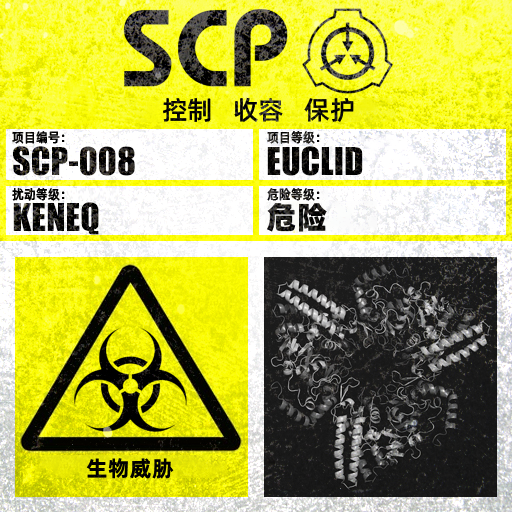
<style>
.page{position:relative;width:512px;height:512px}
.page>*{position:absolute;margin:0}
.t1{font:26px "AlibabaPuHuiTiM";color:#000000}
.t2{font:13.3px "AlibabaPuHuiTiM";letter-spacing:0.02em;color:#000000;scale:0.9 1}
.t3{font:13.3px "AlibabaPuHuiTiM";letter-spacing:0.02em;scale:0.9 1}
.t4{font:30.3px "AlibabaPuHuiTiH";letter-spacing:0.02em}
.t5{font:22px "AlibabaPuHuiTiB";letter-spacing:0.02em;color:#000000}
</style>
<div class="page">
<p class="t1" style="left:163px;top:97px;width:191px;height:26px">控制   收容   保护</p>
<p class="t2" style="left:12px;top:131px;width:53px;height:13px">项目编号：</p>
<p class="t3" style="left:267px;top:131px;width:53px;height:13px">项目等级：</p>
<p class="t2" style="left:12px;top:188px;width:53px;height:13px">扰动等级：</p>
<p class="t3" style="left:267px;top:188px;width:53px;height:13px">危险等级：</p>
<p class="t4" style="left:267px;top:203px;width:60px;height:29px">危险</p>
<p class="t5" style="left:86px;top:458px;width:88px;height:21px">生物威胁</p>
</div>
